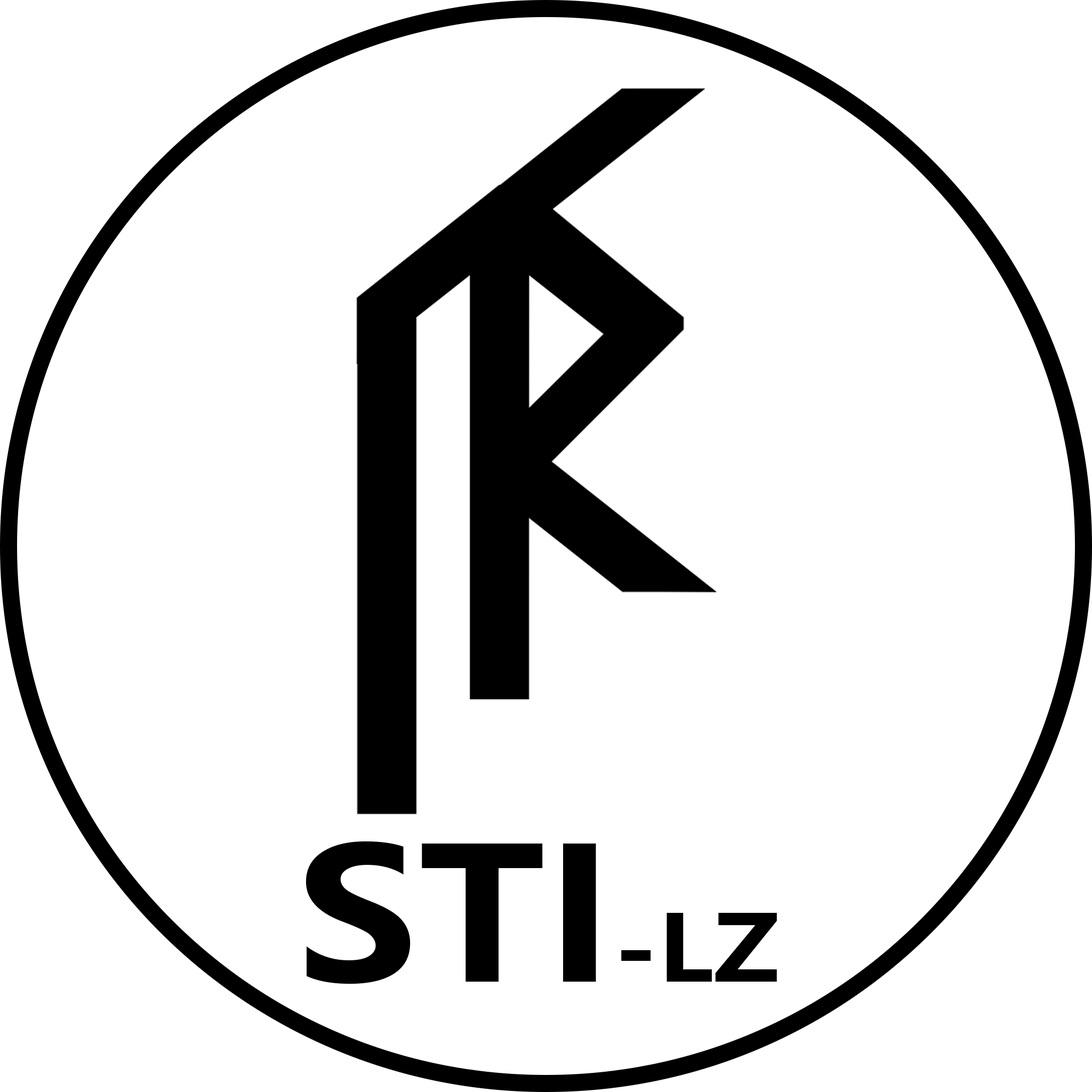
<style>
.page{position:relative;width:1092px;height:1092px;background:#ffffff}
.page>*{position:absolute;margin:0}
.t1{font:182.7px "MicrosoftYaHei-Bold";color:#000000;scale:1.11 1}
.t2{font:91.4px "MicrosoftYaHei-Bold";color:#000000;scale:1.11 1}
</style>
<div class="page">
<p class="t1" style="left:306px;top:841px;width:471px;height:143px">STI<span class="t2">-LZ</span></p>
</div>
